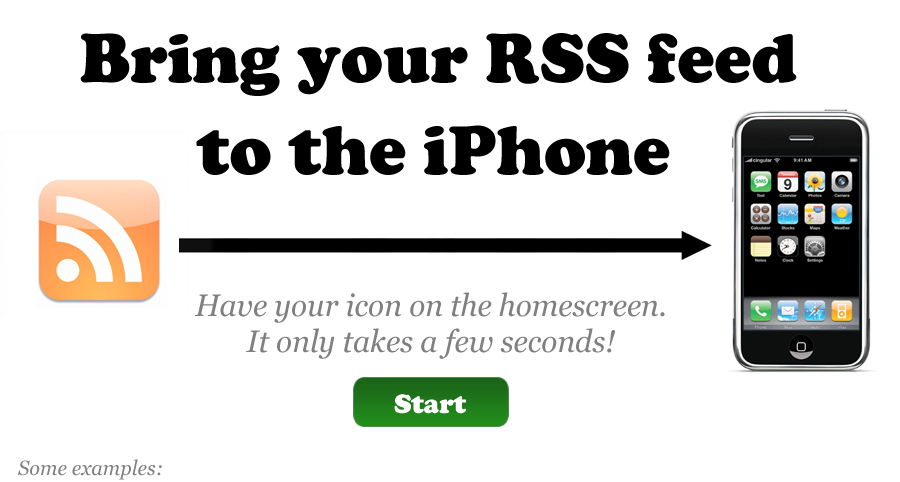
<style>
.page{position:relative;width:900px;height:482px;background:#ffffff}
.page>*{position:absolute;margin:0}
.t1{font:72.1px "CooperBlack";color:#000000}
.t2{font:30.9px "Georgia-Italic";color:#808080}
.t3{font:27.8px "CooperBlack";color:#ffffff}
.t4{font:20.6px "Georgia-Italic";color:#808080}
</style>
<div class="page">
<p class="t1" style="left:80px;top:33px;width:717px;height:63px">Bring your RSS feed</p>
<p class="t1" style="left:196px;top:125px;width:474px;height:50px">to the iPhone</p>
<p class="t2" style="left:194px;top:292px;width:471px;height:67px;text-align:center">Have your icon on the homescreen.<br>It only takes a few seconds!</p>
<p class="t3" style="left:394px;top:394px;width:72px;height:20px">Start</p>
<p class="t4" style="left:18px;top:459px;width:144px;height:21px">Some examples:</p>
</div>
